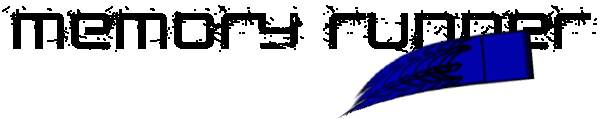
<style>
.page{position:relative;width:600px;height:119px;background:#ffffff}
.page>*{position:absolute;margin:0}
.t1{font:35.1px "CRUSHED";color:#000000;font-weight:bold;scale:1.11 1}
</style>
<div class="page">
<p class="t1" style="left:2px;top:5px;width:595px;height:48px">Memory Runner</p>
</div>
